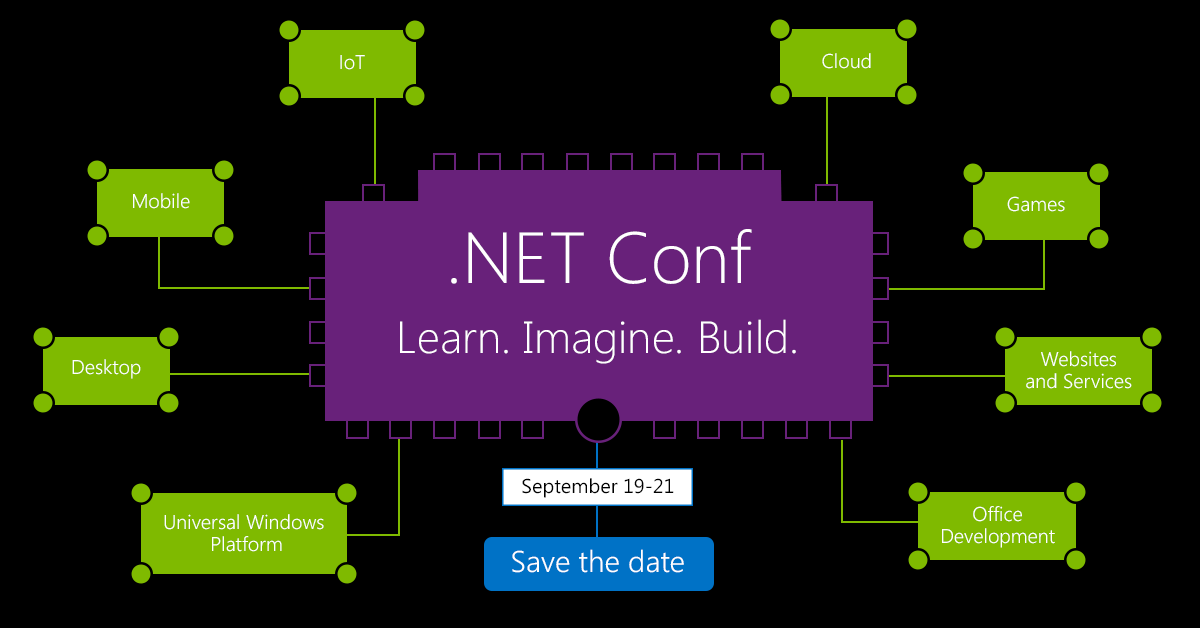
<style>
.page{position:relative;width:1200px;height:628px;background:#000000}
.page>*{position:absolute;margin:0}
.t1{font:20px "SegoeUI-Semilight";color:#ffffff}
.t2{font:45.1px/70px "SegoeUI-Light";color:#ffffff}
.t3{font:72.1px/62.6px "SegoeUI-Light";color:#ffffff}
.t4{font:20px/22.1px "SegoeUI-Semilight";color:#ffffff}
.t5{font:20px "SegoeUI";color:#000000}
.t6{font:30px "SegoeUI-Semilight";color:#ffffff}
</style>
<div class="page">
<p class="t1" style="left:822px;top:53px;width:49px;height:16px">Cloud</p>
<p class="t1" style="left:340px;top:55px;width:25px;height:15px">IoT</p>
<p class="t1" style="left:133px;top:193px;width:57px;height:16px">Mobile</p>
<p class="t1" style="left:1007px;top:196px;width:58px;height:16px">Games</p>
<p class="t2" style="left:400px;top:229px;width:396px;height:135px;text-align:center"><span class="t3">.NET Conf<br></span>Learn. Imagine. Build.</p>
<p class="t4" style="left:1026px;top:351px;width:106px;height:38px;text-align:center">Websites<br>and Services</p>
<p class="t1" style="left:72px;top:359px;width:69px;height:20px">Desktop</p>
<p class="t5" style="left:522px;top:478px;width:152px;height:20px">September 19-21</p>
<p class="t4" style="left:942px;top:506px;width:113px;height:42px;text-align:center">Office<br>Development</p>
<p class="t4" style="left:164px;top:514px;width:160px;height:38px;text-align:center">Universal Windows <br>Platform</p>
<p class="t6" style="left:512px;top:549px;width:172px;height:24px">Save the date</p>
</div>
